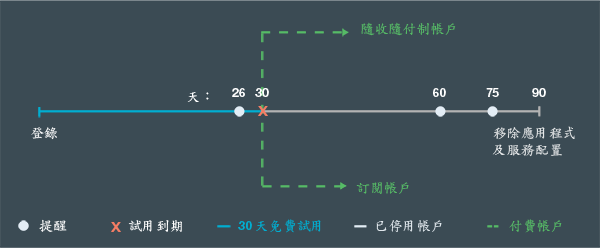
<style>
.page{position:relative;width:600px;height:248px;background:#3b4b54}
.page>*{position:absolute;margin:0}
.t1{font:14px "DFKaiShu-SB-Estd-BF";color:#56bb66}
.t2{font:11.9px "HelvNeueBoldforIBM";color:#ffffff}
.t3{font:14px "DFKaiShu-SB-Estd-BF";color:#ffffff}
.t4{font:12.7px "HelvNeueBoldforIBM";color:#f47d64;scale:1.17 1}
.t5{font:14px "DFKaiShu-SB-Estd-BF";color:#e5e7e8}
.t6{font:14px "DFKaiShu-SB-Estd-BF"}
.t7{font:14px "DFKaiShu-SB-Estd-BF";color:#00aed1}
.t8{font:11.9px "HelvNeueBoldforIBM";color:#00aed1}
.t9{font:14px "DFKaiShu-SB-Estd-BF";color:#dfe6eb}
</style>
<div class="page">
<p class="t1" style="left:361px;top:22px;width:95px;height:14px">隨收隨付制帳戶</p>
<p class="t2" style="left:232px;top:88px;width:13px;height:9px">26</p>
<p class="t2" style="left:255px;top:88px;width:14px;height:9px">30</p>
<p class="t2" style="left:433px;top:88px;width:13px;height:9px">60</p>
<p class="t2" style="left:486px;top:88px;width:13px;height:9px">75</p>
<p class="t2" style="left:532px;top:88px;width:14px;height:9px">90</p>
<p class="t3" style="left:187px;top:92px;width:22px;height:10px">天：</p>
<p class="t4" style="left:258px;top:106px;width:10px;height:10px">X</p>
<p class="t5" style="left:492px;top:126px;width:83px;height:31px">移除應用程式<br>及服務配置</p>
<p class="t6" style="left:31px;top:127px;width:26px;height:13px">登錄</p>
<p class="t1" style="left:356px;top:182px;width:53px;height:12px">訂閱帳戶</p>
<p class="t3" style="left:39px;top:219px;width:28px;height:13px">提醒</p>
<p class="t4" style="left:111px;top:222px;width:10px;height:10px">X</p>
<p class="t3" style="left:128px;top:220px;width:54px;height:12px">試用到期</p>
<p class="t7" style="left:238px;top:219px;width:83px;height:14px"><span class="t8">30 </span>天免費試用</p>
<p class="t9" style="left:376px;top:220px;width:66px;height:12px">已停用帳戶</p>
<p class="t1" style="left:509px;top:219px;width:53px;height:14px">付費帳戶</p>
</div>
